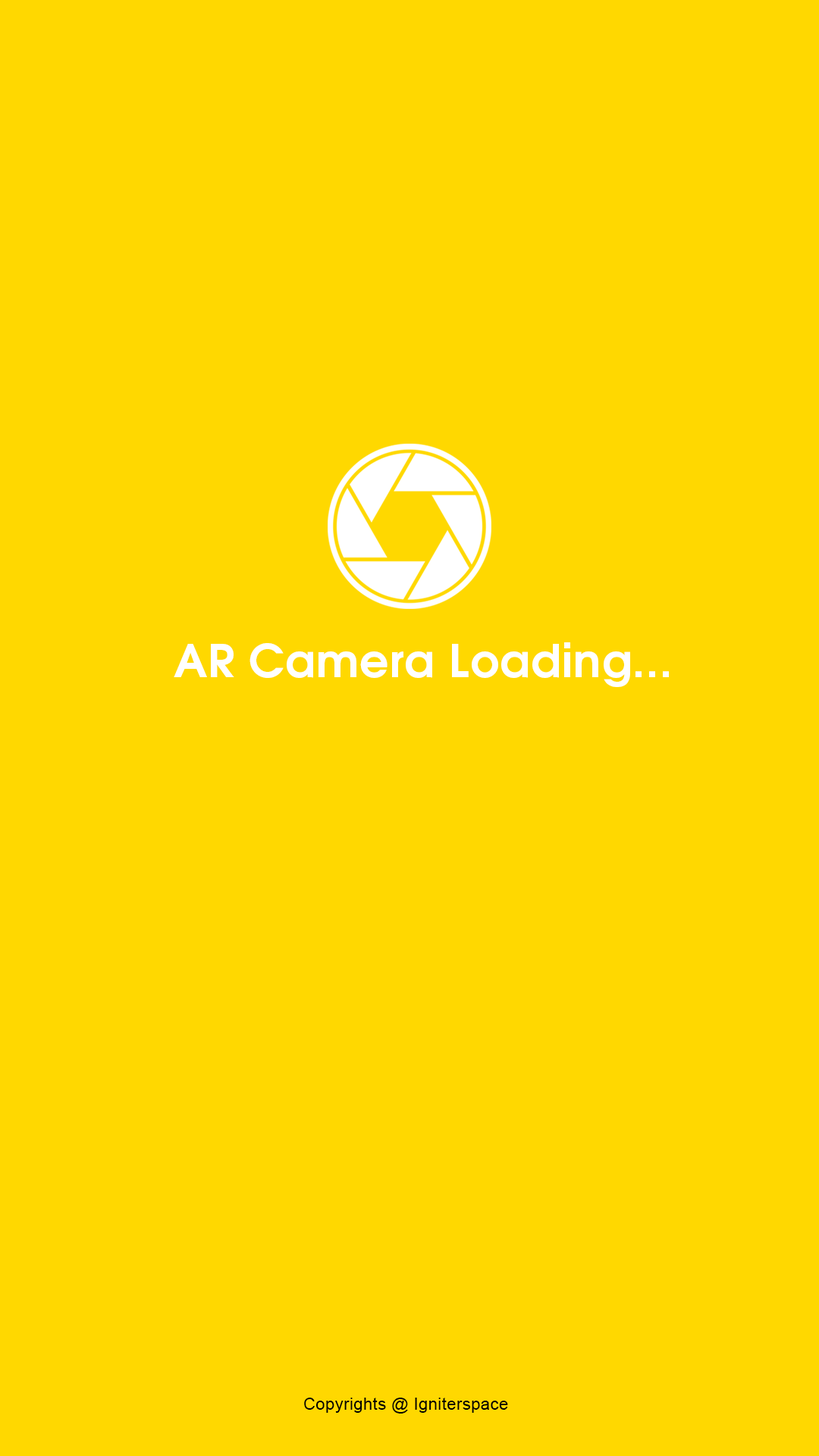
<style>
.page{position:relative;width:819px;height:1456px;background:#ffd800}
.page>*{position:absolute;margin:0}
.t1{font:45.5px "TeXGyreAdventor-Bold";letter-spacing:0.02em;color:#ffffff}
.t2{font:16.7px "ArialMT";letter-spacing:0.02em;color:#000000}
</style>
<div class="page">
<p class="t1" style="left:174px;top:642px;width:495px;height:45px">AR Camera Loading...</p>
<p class="t2" style="left:304px;top:1398px;width:204px;height:16px">Copyrights @ Igniterspace</p>
</div>
